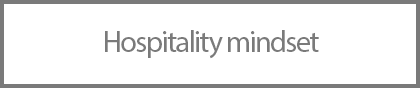
<style>
.page{position:relative;width:420px;height:88px;background:#ffffff}
.page>*{position:absolute;margin:0}
.t1{font:30px "MyriadPro-Regular";letter-spacing:-0.05em;color:#7a7a7a}
</style>
<div class="page">
<p class="t1" style="left:105px;top:30px;width:214px;height:29px">Hospitality mindset</p>
</div>
